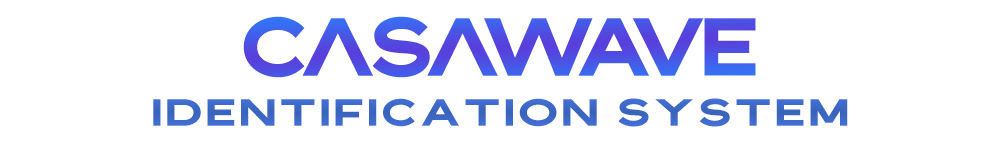
<style>
.page{position:relative;width:1000px;height:150px;background:#ffffff}
.page>*{position:absolute;margin:0}
.t1{font:72.2px "Bristone";letter-spacing:-0.08em;color:#4d4fe3}
.t2{font:33.3px "Bristone";letter-spacing:0.08em;color:#3d69c8;scale:1.14 1}
</style>
<div class="page">
<p class="t1" style="left:243px;top:16px;width:513px;height:62px">CaSaWAVE</p>
<p class="t2" style="left:153px;top:98px;width:695px;height:29px">IDENTIFICATION SYSTEM</p>
</div>
